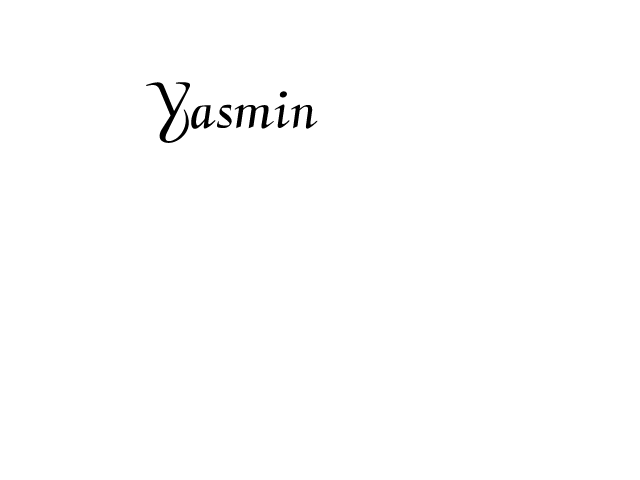
<style>
.page{position:relative;width:640px;height:480px;background:#ffffff}
.page>*{position:absolute;margin:0}
.t1{font:72px "CalligraphyFLF";color:#000000}
</style>
<div class="page">
<p class="t1" style="left:146px;top:82px;width:172px;height:61px">Yasmin</p>
</div>
